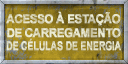
<style>
.page{position:relative;width:128px;height:64px}
.page>*{position:absolute;margin:0}
.t1{font:12px/13.3px "Arial-BoldMT";letter-spacing:-0.04em;text-transform:uppercase;font-weight:bold;scale:0.94 1}
.t2{font:12px/13.3px "Arial-BoldMT";letter-spacing:-0.04em;text-transform:uppercase;font-weight:bold;scale:0.76 1}
</style>
<div class="page">
<p class="t1" style="left:6px;top:11px;width:115px;height:40px;text-align:center">Acesso à estação<br>de carregamento<br><span class="t2">de células de energia</span></p>
</div>
